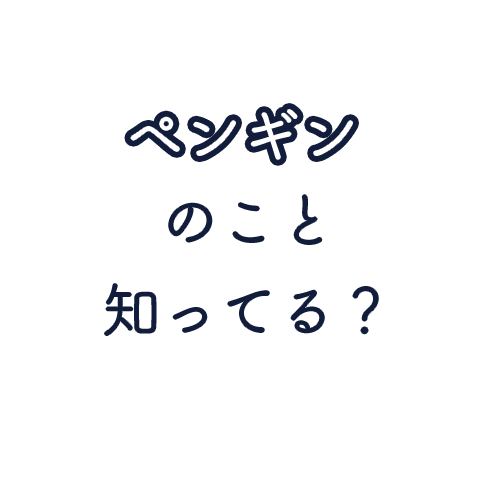
<style>
.page{position:relative;width:500px;height:500px;background:#ffffff}
.page>*{position:absolute;margin:0}
.t1{font:60px/90px "TsukuBRdGothicStd-R";letter-spacing:-0.025em;color:#131d3b}
</style>
<div class="page">
<p class="t1" style="left:105px;top:195px;width:273px;height:140px;text-align:center">のこと<br>知ってる？</p>
</div>
